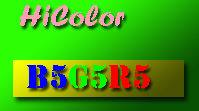
<style>
.page{position:relative;width:199px;height:111px}
.page>*{position:absolute;margin:0}
.t1{font:30px "ForteMT";color:#fc9cb5}
.t2{font:30px "StencilStd";color:#0000ff}
.t3{font:30px "StencilStd";color:#00ff00}
.t4{font:30px "StencilStd";color:#ff0000}
</style>
<div class="page">
<p class="t1" style="left:20px;top:5px;width:104px;height:21px">HiColor</p>
<p class="t2" style="left:27px;top:65px;width:123px;height:23px">B5<span class="t3">G5</span><span class="t4">R5</span></p>
</div>
